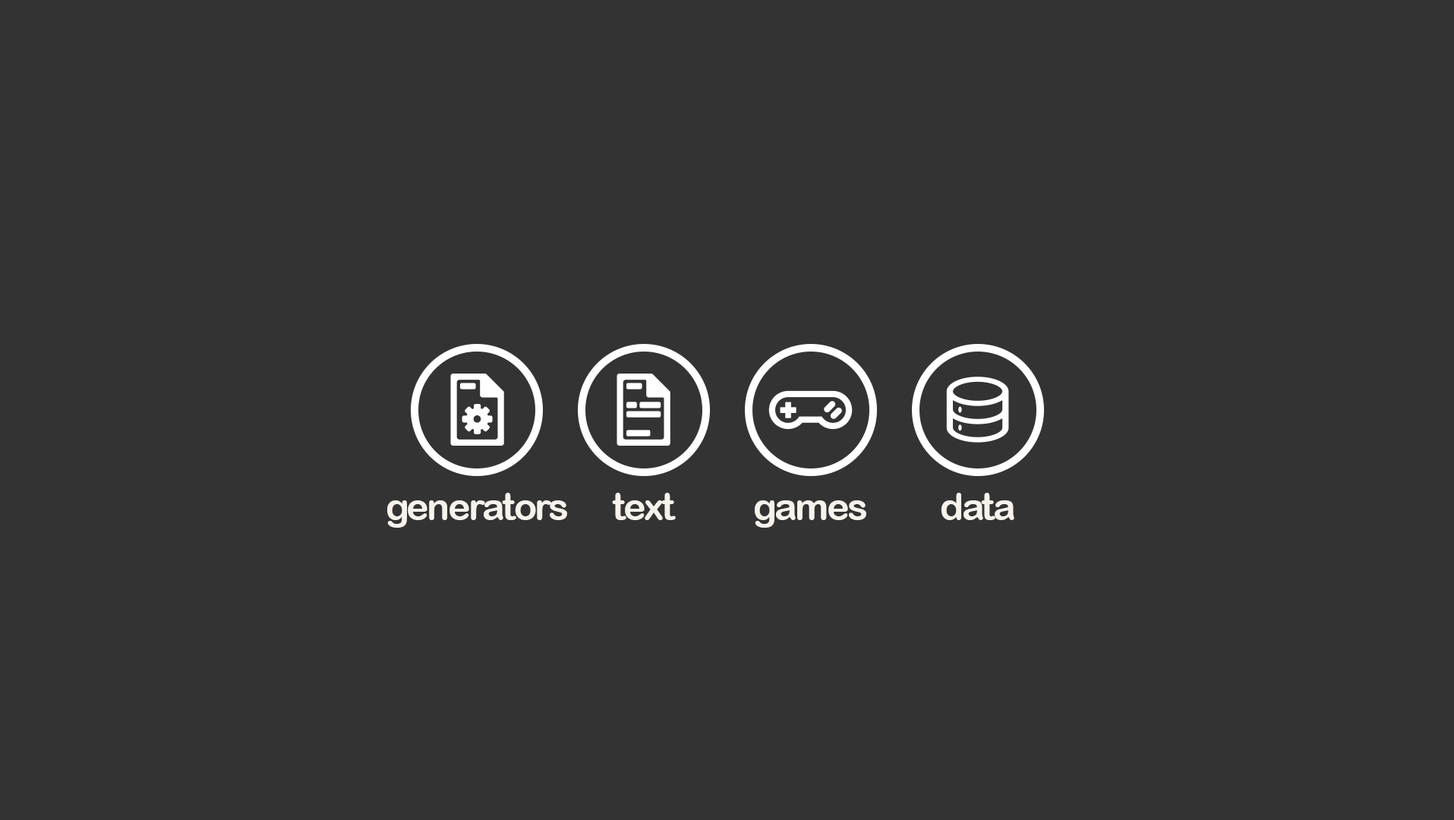
<style>
.page{position:relative;width:1454px;height:820px;background:#333333}
.page>*{position:absolute;margin:0}
.t1{font:38px "ArialRoundedMTBold";letter-spacing:-0.05em;color:#f7f3ec}
</style>
<div class="page">
<p class="t1" style="left:387px;top:493px;width:180px;height:35px">generators</p>
<p class="t1" style="left:612px;top:493px;width:64px;height:27px">text</p>
<p class="t1" style="left:941px;top:493px;width:73px;height:27px">data</p>
<p class="t1" style="left:755px;top:500px;width:111px;height:28px">games</p>
</div>
